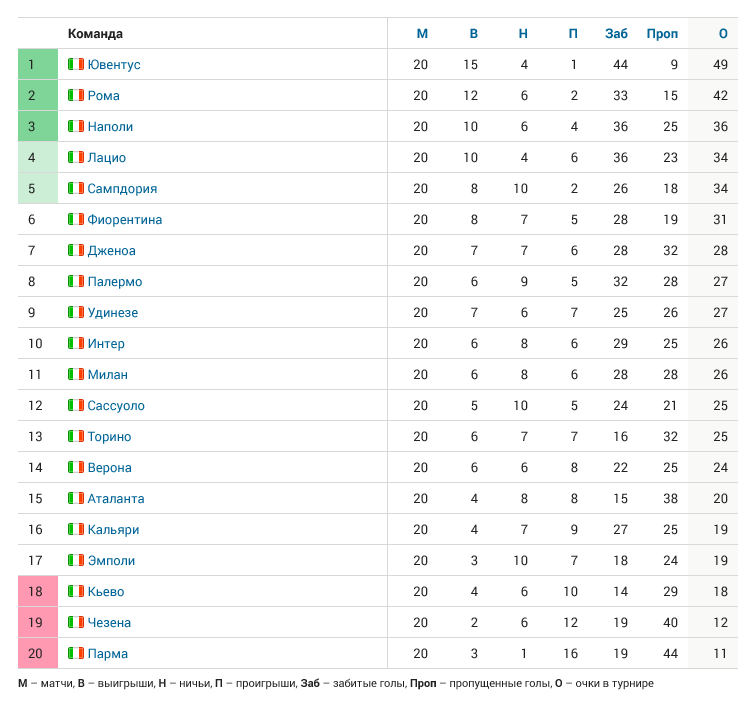
<style>
.page{position:relative;width:755px;height:708px;background:#ffffff}
.page>*{position:absolute;margin:0}
.t1{font:13px/31px "Roboto-Regular";color:#006496}
.t2{font:13px/31px "Roboto-Bold";color:#222222}
.t3{font:13px/30px "Roboto-Regular";color:#006496}
.t4{font:13px/31px "Roboto-Regular";color:#222222}
.t5{font:13px/31px "Roboto-Bold";color:#006496}
.t6{font:13px/30px "Roboto-Regular";color:#222222}
.t7{font:11px "Roboto-Regular";color:#222222}
.t8{font:11px "Roboto-Bold";color:#222222}
</style>
<div class="page">
<p class="t1" style="left:68px;top:28px;width:94px;height:633px"><span class="t2">Команда<br></span>      Ювентус<br>      Рома<br>      Наполи<br>      Лацио<br>      Сампдория<br><span class="t3">      Фиорентина<br></span>      Дженоа<br>      Палермо<br>      Удинезе<br>      Интер<br>      Милан<br>      Сассуоло<br>      Торино<br>      Верона<br>      Аталанта<br><span class="t3">      Кальяри<br></span>      Эмполи<br>      Кьево<br>      Чезена<br>      Парма</p>
<p class="t4" style="left:413px;top:28px;width:15px;height:631px;text-align:right"><span class="t5">М<br></span>20<br>20<br>20<br>20<br>20<br><span class="t6">20<br></span>20<br>20<br>20<br>20<br>20<br>20<br>20<br>20<br>20<br><span class="t6">20<br></span>20<br>20<br>20<br>20</p>
<p class="t4" style="left:464px;top:28px;width:14px;height:631px;text-align:right"><span class="t5">В<br></span>15<br>12<br>10<br>10<br>8<br><span class="t6">8<br></span>7<br>6<br>7<br>6<br>6<br>5<br>6<br>6<br>4<br><span class="t6">4<br></span>3<br>4<br>2<br>3</p>
<p class="t4" style="left:514px;top:28px;width:14px;height:630px;text-align:right"><span class="t5">Н<br></span>4<br>6<br>6<br>4<br>10<br><span class="t6">7<br></span>7<br>9<br>6<br>8<br>8<br>10<br>7<br>6<br>8<br><span class="t6">7<br></span>10<br>6<br>6<br>1</p>
<p class="t4" style="left:564px;top:28px;width:14px;height:631px;text-align:right"><span class="t5">П<br></span>1<br>2<br>4<br>6<br>2<br><span class="t6">5<br></span>6<br>5<br>7<br>6<br>6<br>5<br>7<br>8<br>8<br><span class="t6">9<br></span>7<br>10<br>12<br>16</p>
<p class="t4" style="left:605px;top:28px;width:23px;height:631px;text-align:right"><span class="t5">Заб<br></span>44<br>33<br>36<br>36<br>26<br><span class="t6">28<br></span>28<br>32<br>25<br>29<br>28<br>24<br>16<br>22<br>15<br><span class="t6">27<br></span>18<br>14<br>19<br>19</p>
<p class="t4" style="left:647px;top:28px;width:31px;height:630px;text-align:right"><span class="t5">Проп<br></span>9<br>15<br>25<br>23<br>18<br><span class="t6">19<br></span>32<br>28<br>26<br>25<br>28<br>21<br>32<br>25<br>38<br><span class="t6">25<br></span>24<br>29<br>40<br>44</p>
<p class="t4" style="left:713px;top:28px;width:15px;height:630px;text-align:right"><span class="t5">О<br></span>49<br>42<br>36<br>34<br>34<br><span class="t6">31<br></span>28<br>27<br>27<br>26<br>26<br>25<br>25<br>24<br>20<br><span class="t6">19<br></span>19<br>18<br>12<br>11</p>
<p class="t4" style="left:28px;top:59px;width:15px;height:600px"><span class="t1"><br></span>1<br>2<br>3<br>4<br>5<br><span class="t6">6<br></span>7<br>8<br>9<br>10<br>11<br>12<br>13<br>14<br>15<br><span class="t6">16<br></span>17<br>18<br>19<br>20</p>
<p class="t7" style="left:18px;top:678px;width:636px;height:12px"><span class="t8">М</span> – матчи, <span class="t8">В</span> – выигрыши, <span class="t8">Н</span> – ничьи, <span class="t8">П</span> – проигрыши, <span class="t8">Заб</span> – забитые голы, <span class="t8">Проп</span> – пропущенные голы, <span class="t8">О</span> – очки в турнире</p>
</div>
